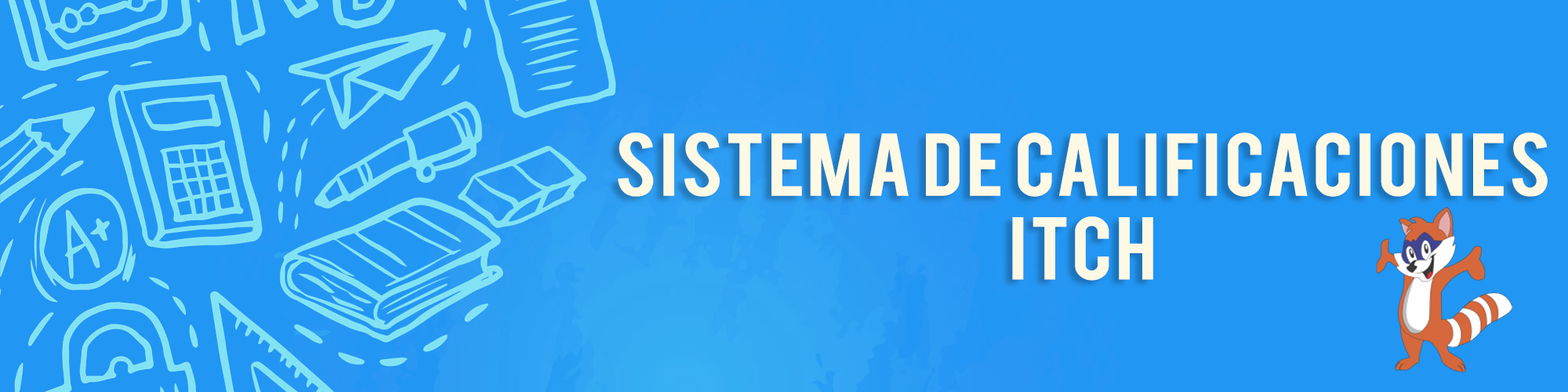
<style>
.page{position:relative;width:1568px;height:392px;background:#2196f3}
.page>*{position:absolute;margin:0}
.t1{font:69.8px "Bebas";letter-spacing:0.02em;color:#fef9e5;scale:1.13 1}
</style>
<div class="page">
<p class="t1" style="left:618px;top:132px;width:930px;height:149px;text-align:center">Sistema de calificaciones<br>itch</p>
</div>
